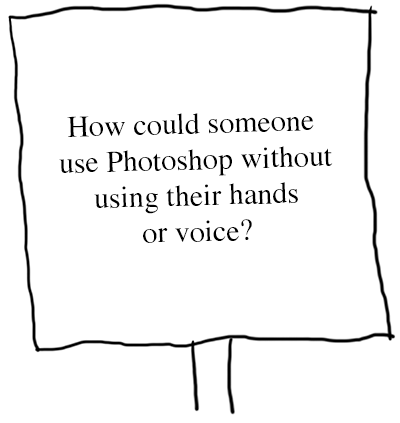
<style>
.page{position:relative;width:400px;height:423px;background:#ffffff}
.page>*{position:absolute;margin:0}
.t1{font:30px "Times-Roman";color:#000000}
</style>
<div class="page">
<p class="t1" style="left:59px;top:113px;width:274px;height:130px;text-align:center;rotate:-2deg">How could someone <br>use Photoshop without<br>using their hands<br>or voice?</p>
</div>
